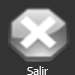
<style>
.page{position:relative;width:75px;height:75px;background:#333333}
.page>*{position:absolute;margin:0}
.t1{font:11px "Tahoma";color:#ffffff}
</style>
<div class="page">
<p class="t1" style="left:27px;top:66px;width:21px;height:9px">Salir</p>
</div>
